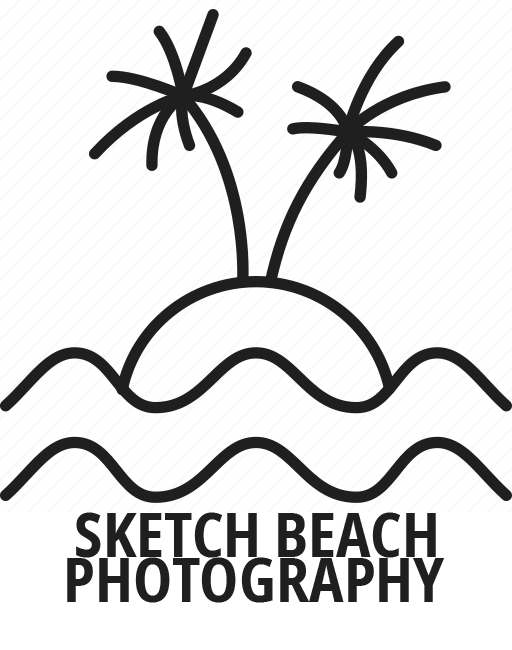
<style>
.page{position:relative;width:512px;height:650px;background:#ffffff}
.page>*{position:absolute;margin:0}
.t1{font:60px "NotoSans-CondensedBold";color:#1f1f1f}
</style>
<div class="page">
<p class="t1" style="left:76px;top:512px;width:360px;height:46px">SKETCH BEACH</p>
<p class="t1" style="left:67px;top:557px;width:378px;height:46px">PHOTOGRAPHY</p>
</div>
